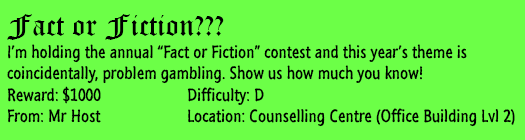
<style>
.page{position:relative;width:525px;height:140px;background:#6cff47}
.page>*{position:absolute;margin:0}
.t1{font:18px "SegoeMarker";color:#000000}
.t2{font:30px "OldEnglishTextMT";color:#000000}
</style>
<div class="page">
<p class="t1" style="left:7px;top:14px;width:508px;height:113px"><span class="t2">Fact or Fiction???<br></span>I’m holding the annual “Fact or Fiction” contest and this year’s theme is <br>coincidentally, problem gambling. Show us how much you know!<br>Reward: $1000   Difficulty: D<br>From: Mr Host   Location: Counselling Centre (Office Building Lvl 2)</p>
</div>
